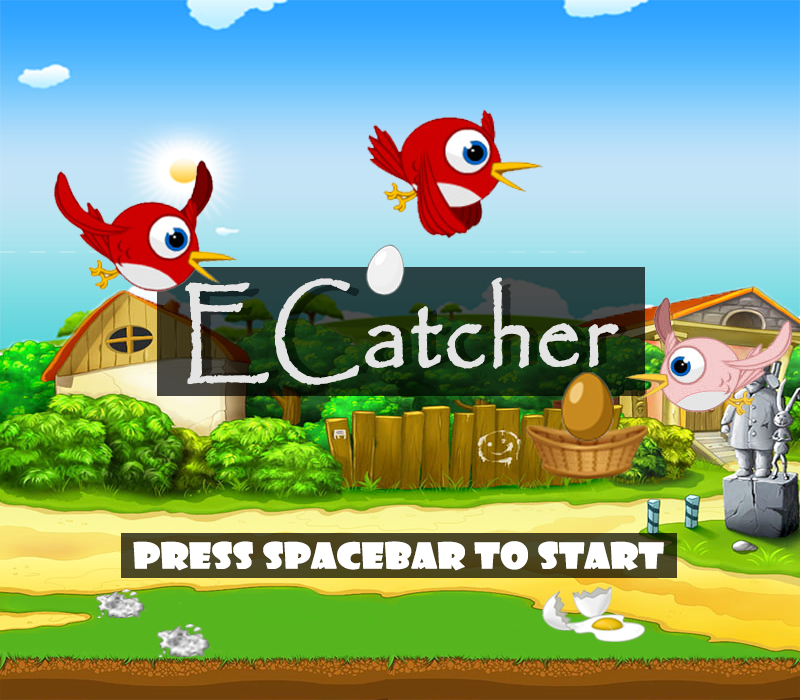
<style>
.page{position:relative;width:800px;height:700px}
.page>*{position:absolute;margin:0}
.t1{font:105.7px "Papyrus-Regular";color:#e4e4e4;font-weight:bold;scale:0.84 1}
.t2{font:33.8px "ShowcardGothic-Reg";color:#ffffff;font-weight:bold;scale:1.17 1}
</style>
<div class="page">
<p class="t1" style="left:185px;top:277px;width:434px;height:108px">ECatcher</p>
<p class="t2" style="left:133px;top:541px;width:531px;height:30px">Press SPACEBar to Start</p>
</div>
